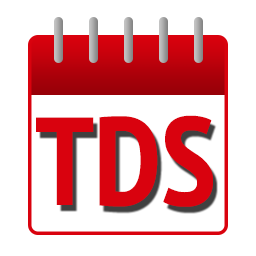
<style>
.page{position:relative;width:256px;height:256px;background:#ffffff}
.page>*{position:absolute;margin:0}
.t1{font:125px "PTSans-NarrowBold";color:#da020e}
</style>
<div class="page">
<p class="t1" style="left:36px;top:115px;width:177px;height:92px">TDS</p>
</div>
